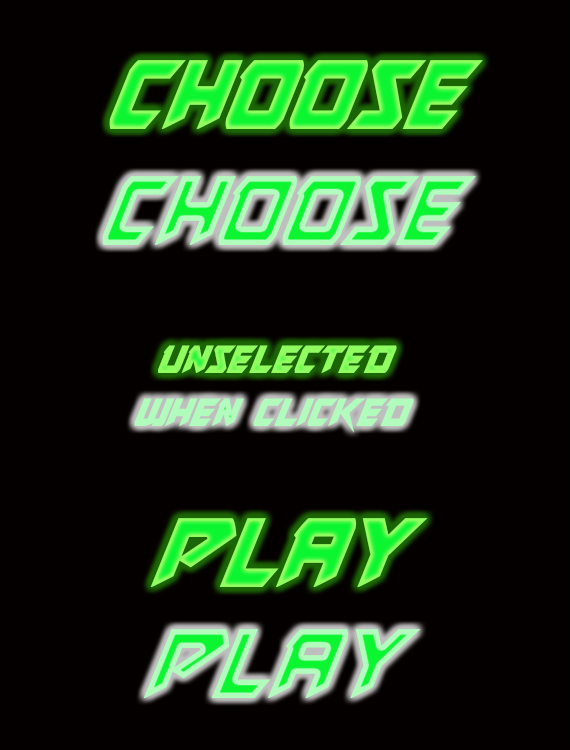
<style>
.page{position:relative;width:570px;height:750px;background:#050000}
.page>*{position:absolute;margin:0}
.t1{font:120px "SkirmisherCondensedItalic"}
.t2{font:48px "SkirmisherCondensedItalic";color:#91fc60}
.t3{font:48px "SkirmisherCondensedItalic";color:#b1fcbd}
</style>
<div class="page">
<p class="t1" style="left:109px;top:60px;width:374px;height:69px">choose</p>
<p class="t1" style="left:102px;top:176px;width:374px;height:69px">choose</p>
<p class="t2" style="left:158px;top:345px;width:239px;height:28px">unselected</p>
<p class="t3" style="left:134px;top:398px;width:280px;height:35px">when clicked</p>
<p class="t1" style="left:150px;top:518px;width:278px;height:69px">play</p>
<p class="t1" style="left:143px;top:629px;width:278px;height:69px">play</p>
</div>
